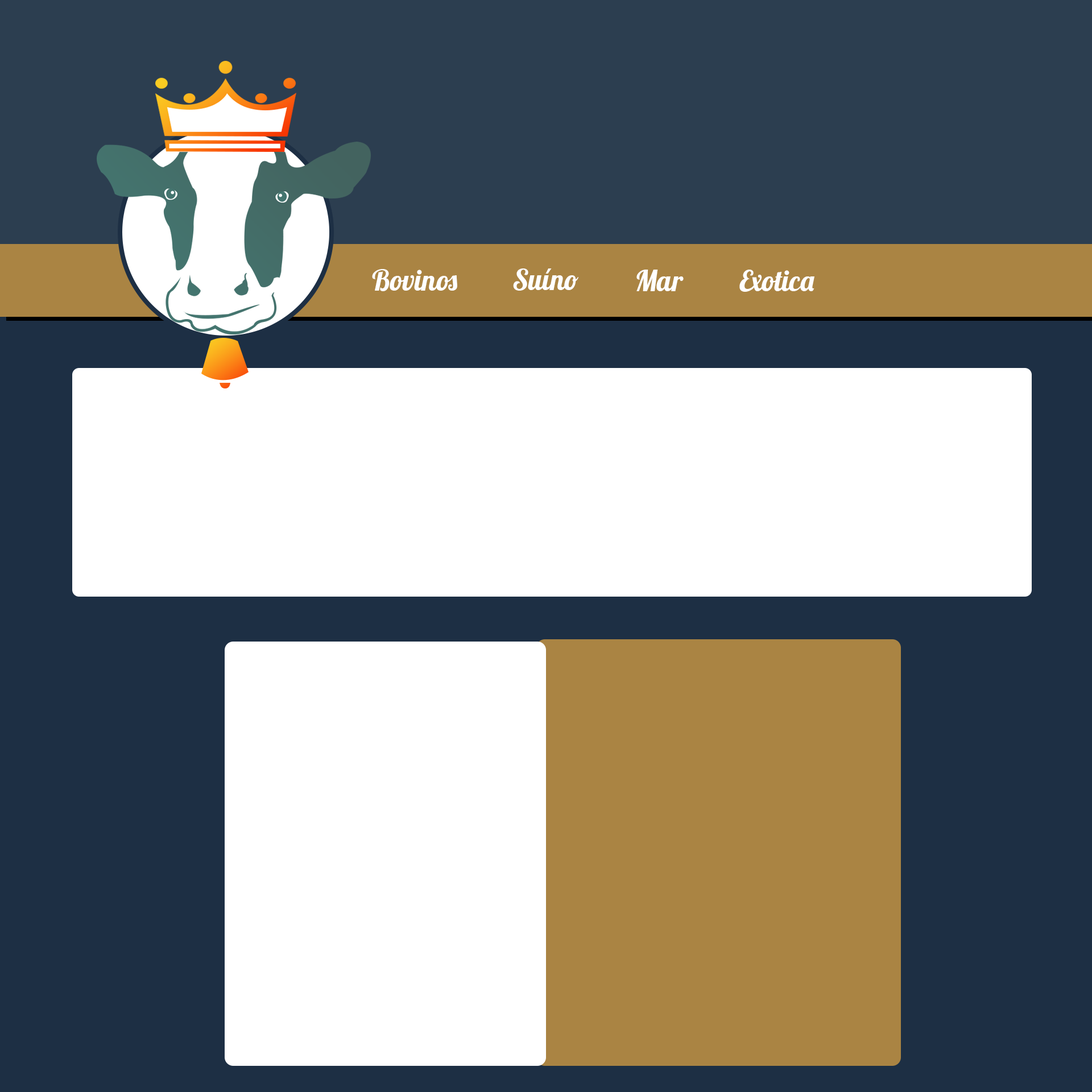
<style>
.page{position:relative;width:1092px;height:1092px;background:#ffffff}
.page>*{position:absolute;margin:0}
.t1{font:28.4px "Lobster-Regular";color:#ffffff}
</style>
<div class="page">
<p class="t1" style="left:372px;top:269px;width:85px;height:22px">Bovinos</p>
<p class="t1" style="left:513px;top:268px;width:66px;height:23px">Suíno</p>
<p class="t1" style="left:636px;top:270px;width:48px;height:21px">Mar</p>
<p class="t1" style="left:739px;top:270px;width:75px;height:22px">Exotica</p>
</div>
